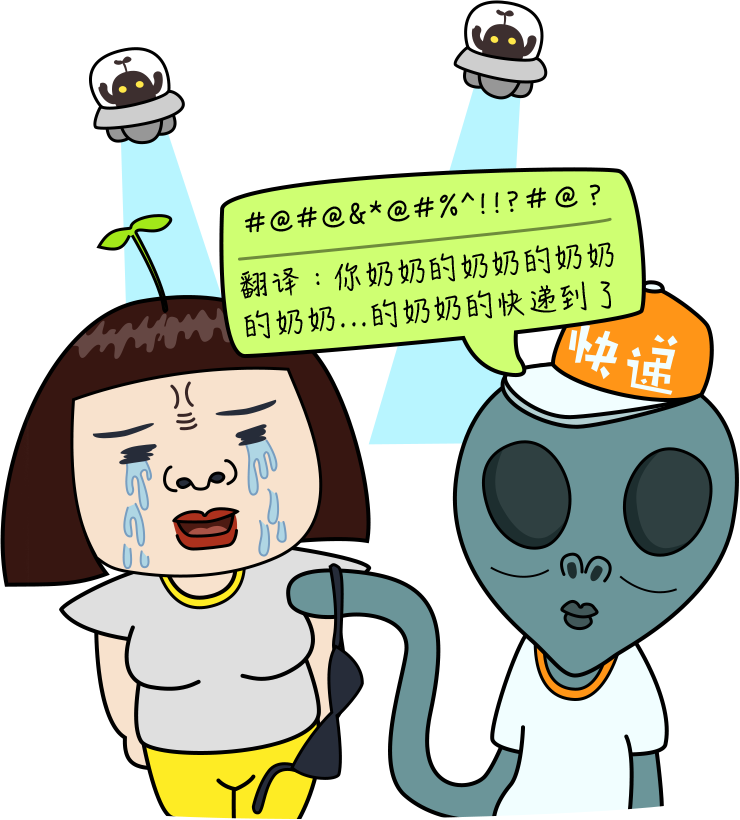
<style>
.page{position:relative;width:740px;height:820px;background:#ffffff}
.page>*{position:absolute;margin:0}
.t1{font:28px "HanziPenSC-W5";letter-spacing:0.1em;color:#000000}
</style>
<div class="page">
<p class="t1" style="left:245px;top:184px;width:355px;height:49px;rotate:-5deg">#@#@&amp;*@#%^!!?＃@？</p>
<p class="t1" style="left:334px;top:242px;width:280px;height:49px;rotate:-5deg">你奶奶的奶奶的奶奶</p>
<p class="t1" style="left:240px;top:267px;width:80px;height:32px;rotate:-5deg">翻译：</p>
<p class="t1" style="left:244px;top:281px;width:367px;height:58px;rotate:-5deg">的奶奶...的奶奶的快递到了</p>
</div>
